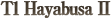
<style>
.page{position:relative;width:112px;height:18px;background:#ffffff}
.page>*{position:absolute;margin:0}
.t1{font:18px "RyuminPro-ExBold";letter-spacing:-0.08em;color:#4a3f32;font-weight:bold;scale:0.9 1}
</style>
<div class="page">
<p class="t1" style="left:0px;top:1px;width:111px;height:18px">T1 Hayabusa II</p>
</div>
